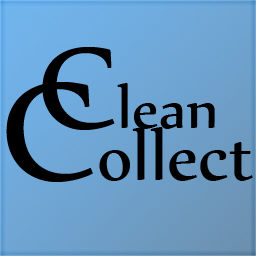
<style>
.page{position:relative;width:256px;height:256px}
.page>*{position:absolute;margin:0}
.t1{font:68px "Nyala-Regular";color:#000000}
.t2{font:140px "Nyala-Regular";color:#000000}
.t3{font:80px "Nyala-Regular";color:#000000}
.t4{font:168px "Nyala-Regular";color:#000000}
</style>
<div class="page">
<p class="t1" style="left:42px;top:47px;width:173px;height:83px"><span class="t2">C</span>lean</p>
<p class="t3" style="left:6px;top:82px;width:247px;height:100px"><span class="t4">C</span>ollect</p>
</div>
